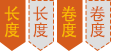
<style>
.page{position:relative;width:114px;height:51px;background:#d55b1c}
.page>*{position:absolute;margin:0}
.t1{font:16.5px/27px "AdobeHeitiStd-Regular";letter-spacing:-0.05em;color:#fabc03}
.t2{font:16.5px/27px "AdobeHeitiStd-Regular";letter-spacing:-0.05em;color:#d55b1c}
</style>
<div class="page">
<p class="t1" style="left:4px;top:6px;width:16px;height:32px">长度</p>
<p class="t2" style="left:33px;top:6px;width:15px;height:32px">长度</p>
<p class="t1" style="left:61px;top:6px;width:16px;height:32px">卷度</p>
<p class="t2" style="left:90px;top:6px;width:15px;height:32px">卷度</p>
</div>
